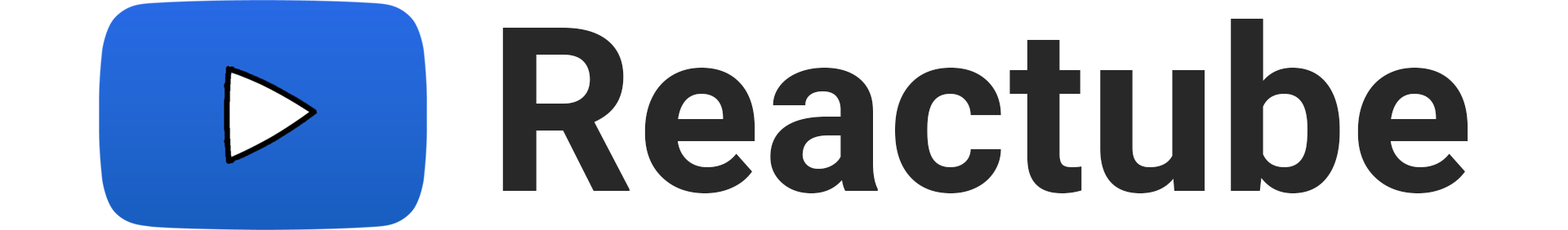
<style>
.page{position:relative;width:1568px;height:230px;background:#ffffff}
.page>*{position:absolute;margin:0}
.t1{font:229.1px "Roboto-Bold";letter-spacing:0.01em;color:#282828}
</style>
<div class="page">
<p class="t1" style="left:502px;top:18px;width:966px;height:176px">Reactube</p>
</div>
